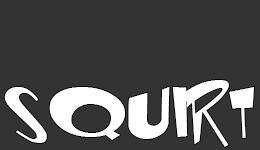
<style>
.page{position:relative;width:260px;height:150px;background:#333333}
.page>*{position:absolute;margin:0}
.t1{font:75.6px "Toontime";color:#ffffff}
</style>
<div class="page">
<p class="t1" style="left:4px;top:80px;width:250px;height:67px">SQUIRT</p>
</div>
